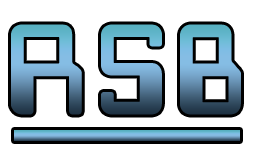
<style>
.page{position:relative;width:256px;height:160px;background:#ffffff}
.page>*{position:absolute;margin:0}
.t1{font:145.2px "Future";font-weight:bold}
</style>
<div class="page">
<p class="t1" style="left:11px;top:24px;width:230px;height:91px">RSB</p>
</div>
